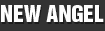
<style>
.page{position:relative;width:105px;height:31px;background:#333333}
.page>*{position:absolute;margin:0}
.t1{font:21.2px "HelveticaInseratLTStd-Roman";color:#fefefe}
</style>
<div class="page">
<p class="t1" style="left:1px;top:5px;width:103px;height:17px">NEW ANGEL</p>
</div>
